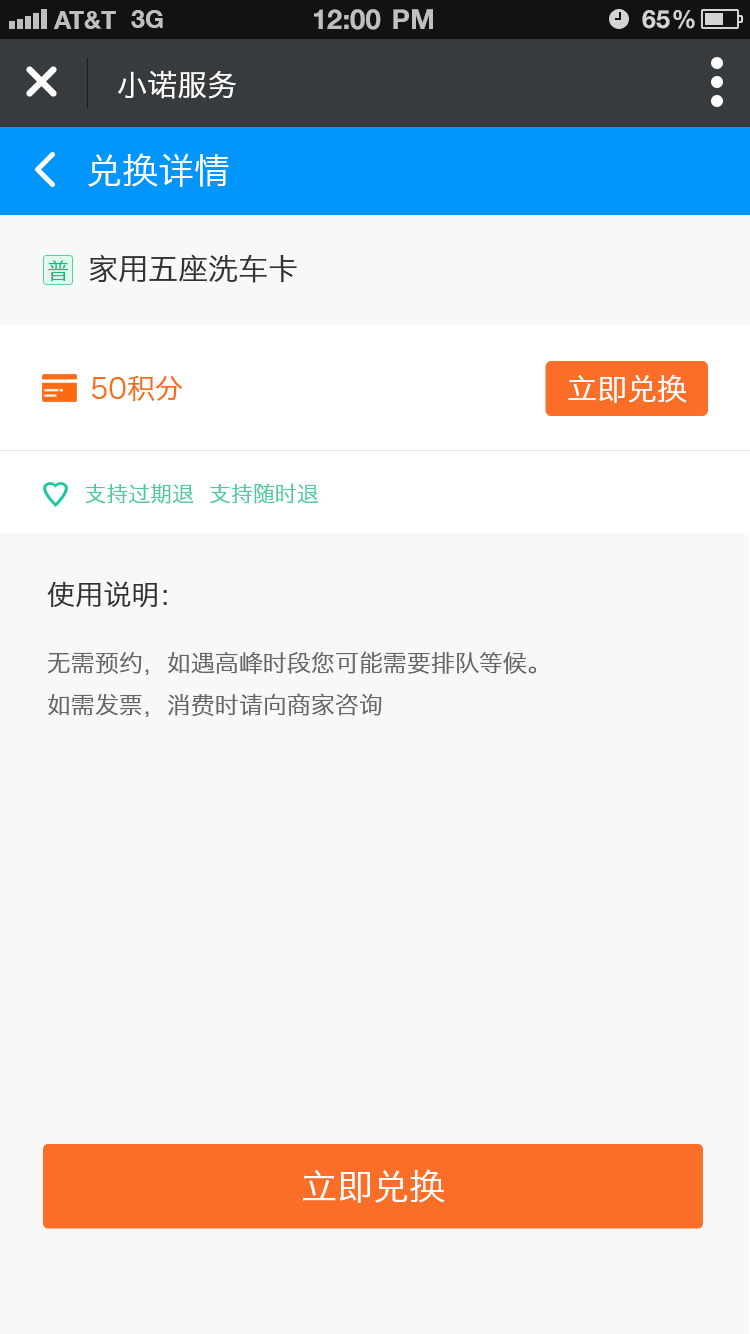
<style>
.page{position:relative;width:750px;height:1334px;background:#f8f8f8}
.page>*{position:absolute;margin:0}
.t1{font:30px "HiraginoSansGB-W3";color:#ffffff}
.t2{font:36px "HiraginoSansGB-W3";color:#ffffff}
.t3{font:30px "HiraginoSansGB-W3";color:#333333}
.t4{font:22px "HiraginoSansGB-W3";color:#07c279}
.t5{font:28px "HiraginoSansGB-W3";color:#fb6b15}
.t6{font:22px "HiraginoSansGB-W3";color:#4ecaa3}
.t7{font:28px "HiraginoSansGB-W3";color:#333333}
.t8{font:24px "HiraginoSansGB-W3";color:#666666}
</style>
<div class="page">
<p class="t1" style="left:118px;top:70px;width:118px;height:29px">小诺服务</p>
<p class="t2" style="left:88px;top:153px;width:141px;height:34px">兑换详情</p>
<p class="t3" style="left:89px;top:254px;width:208px;height:29px">家用五座洗车卡</p>
<p class="t4" style="left:48px;top:260px;width:20px;height:21px">普</p>
<p class="t5" style="left:92px;top:375px;width:90px;height:27px">50积分</p>
<p class="t1" style="left:568px;top:374px;width:119px;height:29px">立即兑换</p>
<p class="t6" style="left:85px;top:483px;width:234px;height:21px">支持过期退  支持随时退</p>
<p class="t7" style="left:47px;top:581px;width:120px;height:27px">使用说明：</p>
<p class="t8" style="left:47px;top:651px;width:490px;height:66px">无需预约，如遇高峰时段您可能需要排队等候。<br>如需发票，消费时请向商家咨询</p>
<p class="t2" style="left:303px;top:1169px;width:142px;height:34px">立即兑换</p>
</div>
